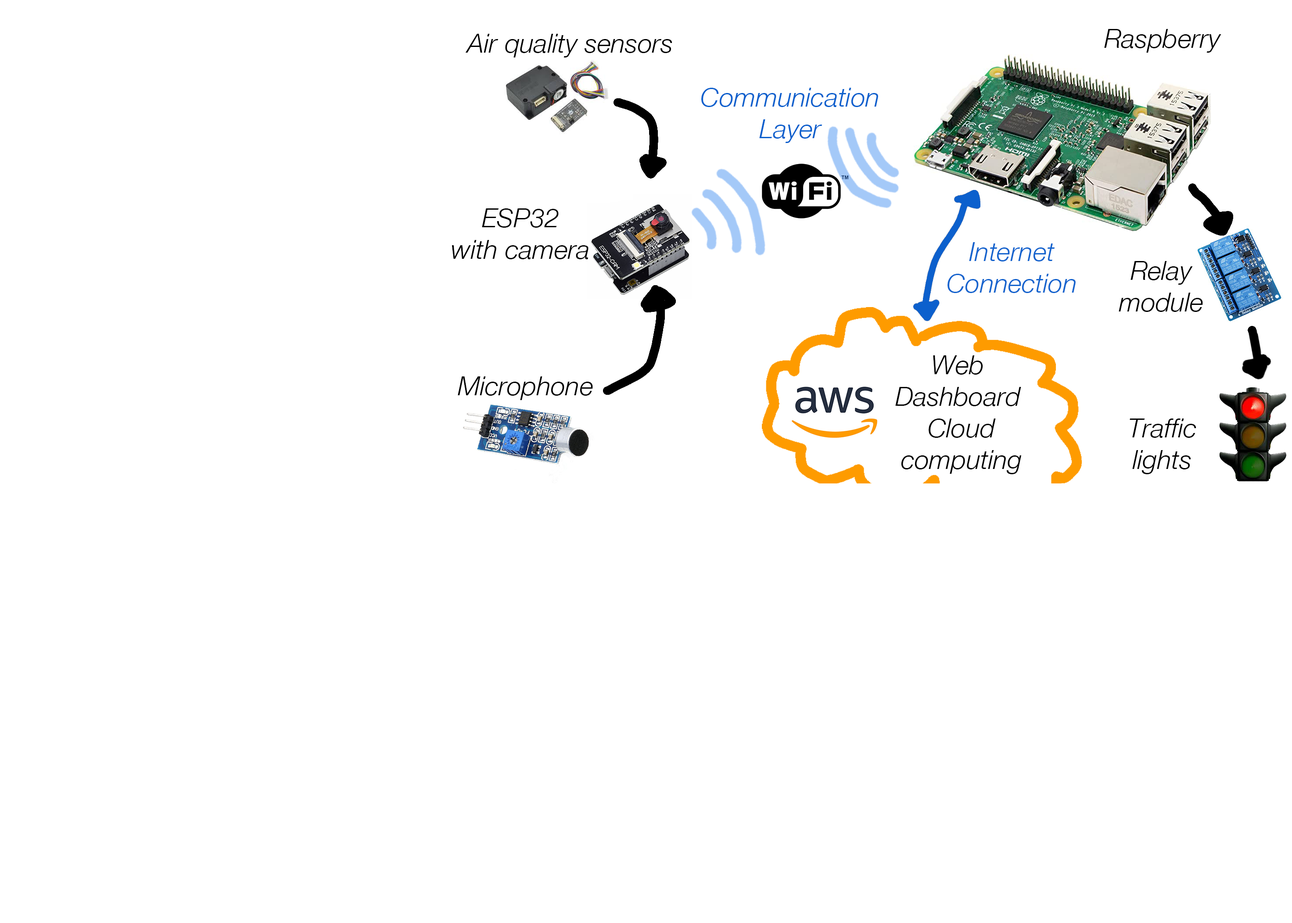
<style>
.page{position:relative;width:1292px;height:923px;background:#ffffff}
.page>*{position:absolute;margin:0}
.t1{font:26.3px "HelveticaNeue-Italic";color:#000000}
.t2{font:26.3px "HelveticaNeue-Italic";color:#0c60cd}
.t3{font:26.3px "HelveticaNeue-Italic";color:#1564ce}
</style>
<div class="page">
<p class="t1" style="left:1104px;top:29px;width:117px;height:24px">Raspberry</p>
<p class="t1" style="left:465px;top:34px;width:207px;height:23px">Air quality sensors</p>
<p class="t2" style="left:701px;top:88px;width:177px;height:55px;text-align:center">Communication<br>Layer</p>
<p class="t1" style="left:451px;top:208px;width:137px;height:51px;text-align:center">ESP32<br>with camera</p>
<p class="t3" style="left:947px;top:242px;width:128px;height:51px;text-align:center">Internet<br>Connection</p>
<p class="t1" style="left:1118px;top:261px;width:85px;height:51px;text-align:center">Relay<br>module</p>
<p class="t1" style="left:895px;top:355px;width:126px;height:119px;text-align:center">Web <br>Dashboard <br>Cloud<br>computing</p>
<p class="t1" style="left:458px;top:376px;width:135px;height:24px">Microphone</p>
<p class="t1" style="left:1129px;top:419px;width:67px;height:55px;text-align:center">Traffic<br>lights</p>
</div>
